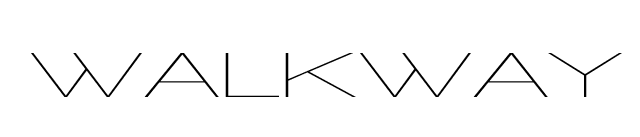
<style>
.page{position:relative;width:640px;height:137px;background:#ffffff}
.page>*{position:absolute;margin:0}
.t1{font:65px "WalkwayUltraExpand";color:#000000}
</style>
<div class="page">
<p class="t1" style="left:31px;top:53px;width:591px;height:44px">WALKWAY</p>
</div>
